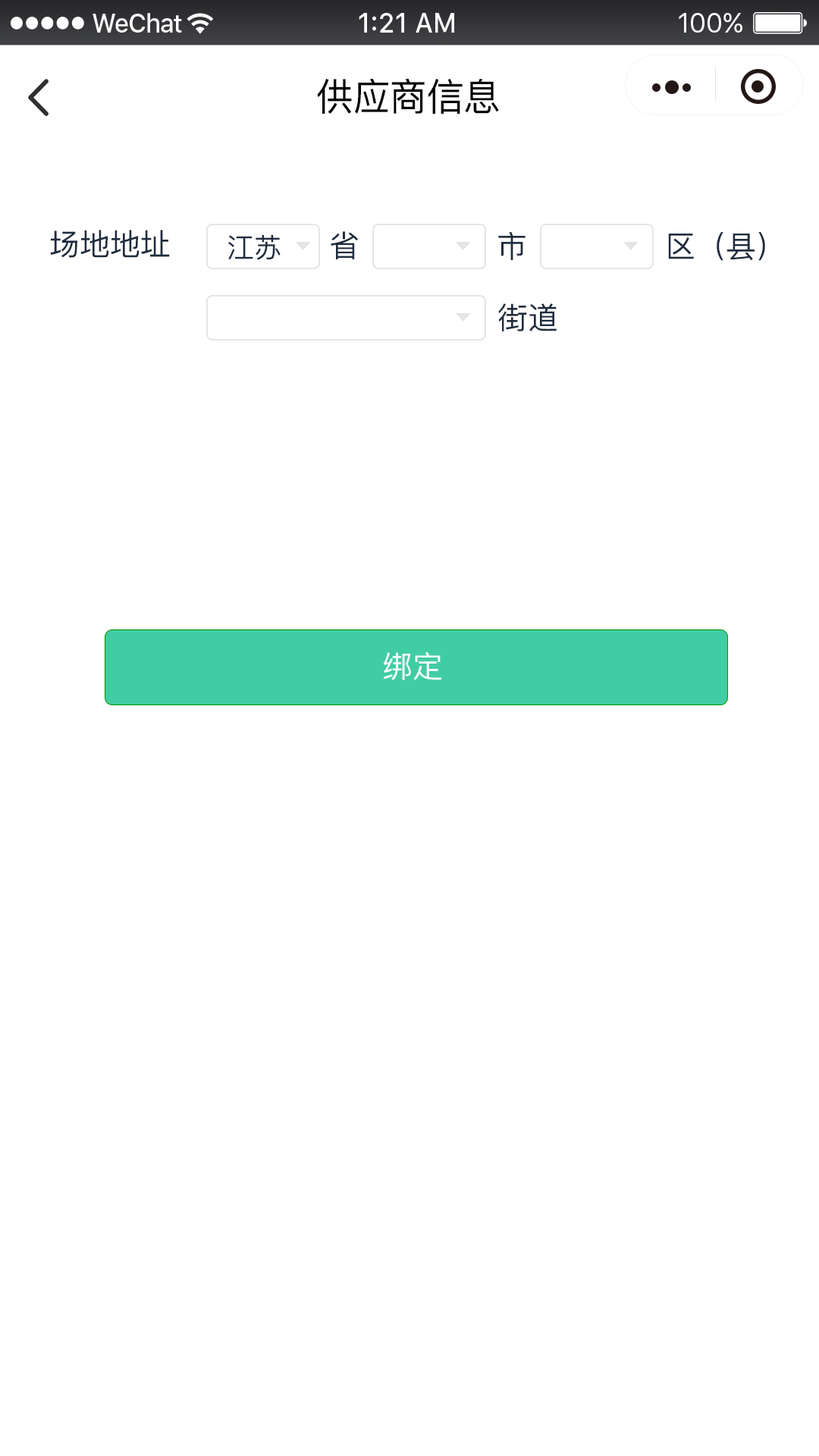
<style>
.page{position:relative;width:819px;height:1456px;background:#ffffff}
.page>*{position:absolute;margin:0}
.t1{font:37.9px "PingFangSC-Regular";color:#000000}
.t2{font:30.3px "PingFangSC-Regular";color:#1e2c3e}
.t3{font:27.3px "PingFangSC-Regular";color:#1e2c3e}
.t4{font:30.3px "PingFangSC-Regular";color:#ffffff}
</style>
<div class="page">
<p class="t1" style="left:317px;top:78px;width:182px;height:36px">供应商信息</p>
<p class="t2" style="left:50px;top:230px;width:120px;height:28px">场地地址</p>
<p class="t2" style="left:331px;top:231px;width:27px;height:28px">省</p>
<p class="t2" style="left:498px;top:232px;width:28px;height:28px">市</p>
<p class="t2" style="left:668px;top:232px;width:97px;height:29px">区（县）</p>
<p class="t3" style="left:227px;top:234px;width:54px;height:26px">江苏</p>
<p class="t2" style="left:498px;top:303px;width:59px;height:28px">街道</p>
<p class="t4" style="left:383px;top:652px;width:58px;height:28px">绑定</p>
</div>
